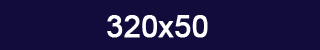
<style>
.page{position:relative;width:320px;height:50px;background:#110c3c}
.page>*{position:absolute;margin:0}
.t1{font:30px "ArialMT";color:#ffffff;font-weight:bold}
</style>
<div class="page">
<p class="t1" style="left:107px;top:15px;width:101px;height:23px">320x50</p>
</div>
